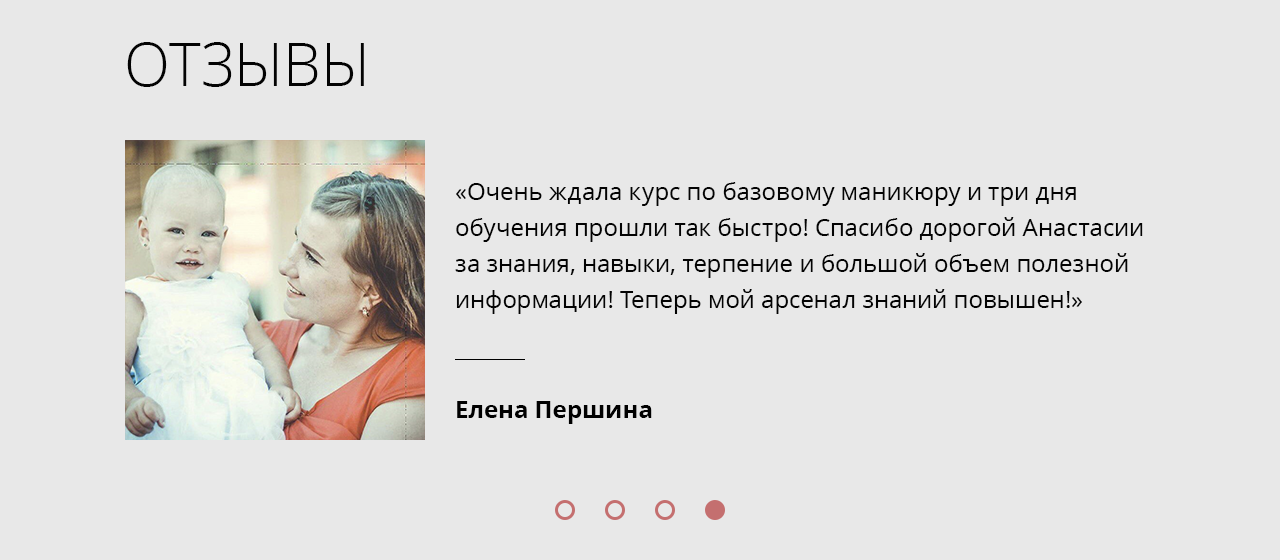
<style>
.page{position:relative;width:1280px;height:560px;background:#e8e8e8}
.page>*{position:absolute;margin:0}
.t1{font:60px "OpenSans-Light";color:#030303}
.t2{font:24px/36px "OpenSans";color:#030303}
.t3{font:24px "OpenSans-Bold";color:#000000}
</style>
<div class="page">
<p class="t1" style="left:127px;top:42px;width:237px;height:45px">ОТЗЫВЫ</p>
<p class="t2" style="left:455px;top:182px;width:688px;height:132px">«Очень ждала курс по базовому маникюру и три дня обучения прошли так быстро! Спасибо дорогой Анастасии за знания, навыки, терпение и большой объем полезной информации! Теперь мой арсенал знаний повышен!»</p>
<p class="t3" style="left:457px;top:401px;width:195px;height:23px">Елена Першина</p>
</div>
